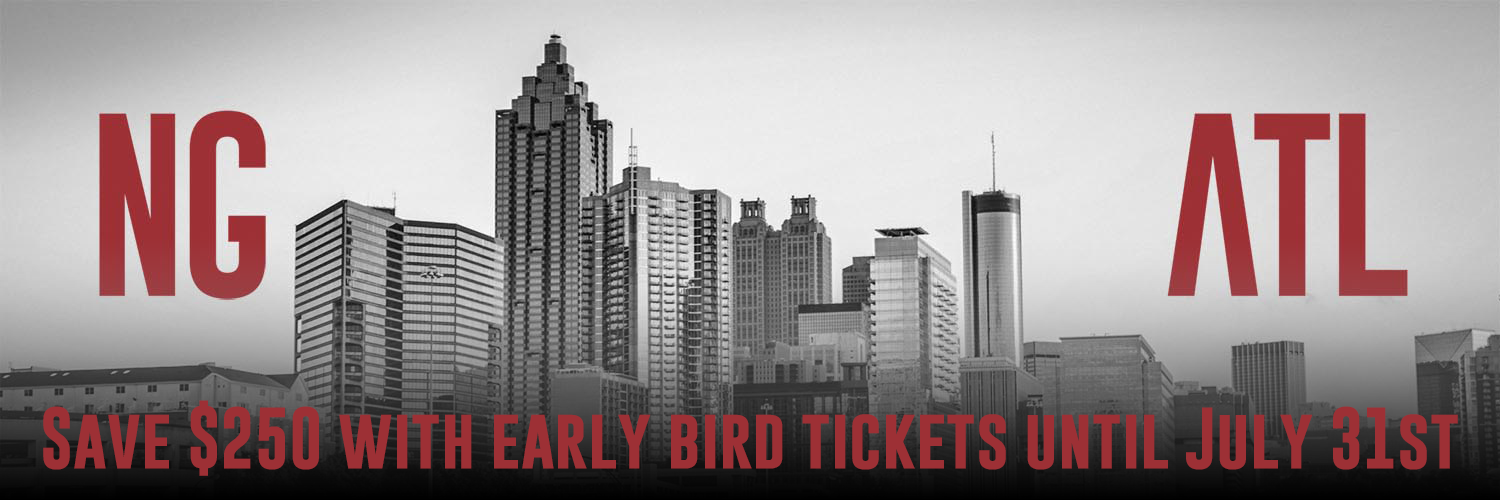
<style>
.page{position:relative;width:1500px;height:500px}
.page>*{position:absolute;margin:0}
.t1{font:62.5px "GoboldBold";color:#9d3035}
</style>
<div class="page">
<p class="t1" style="left:43px;top:400px;width:1415px;height:76px">Save $250 with early bird tickets until July 31st</p>
</div>
